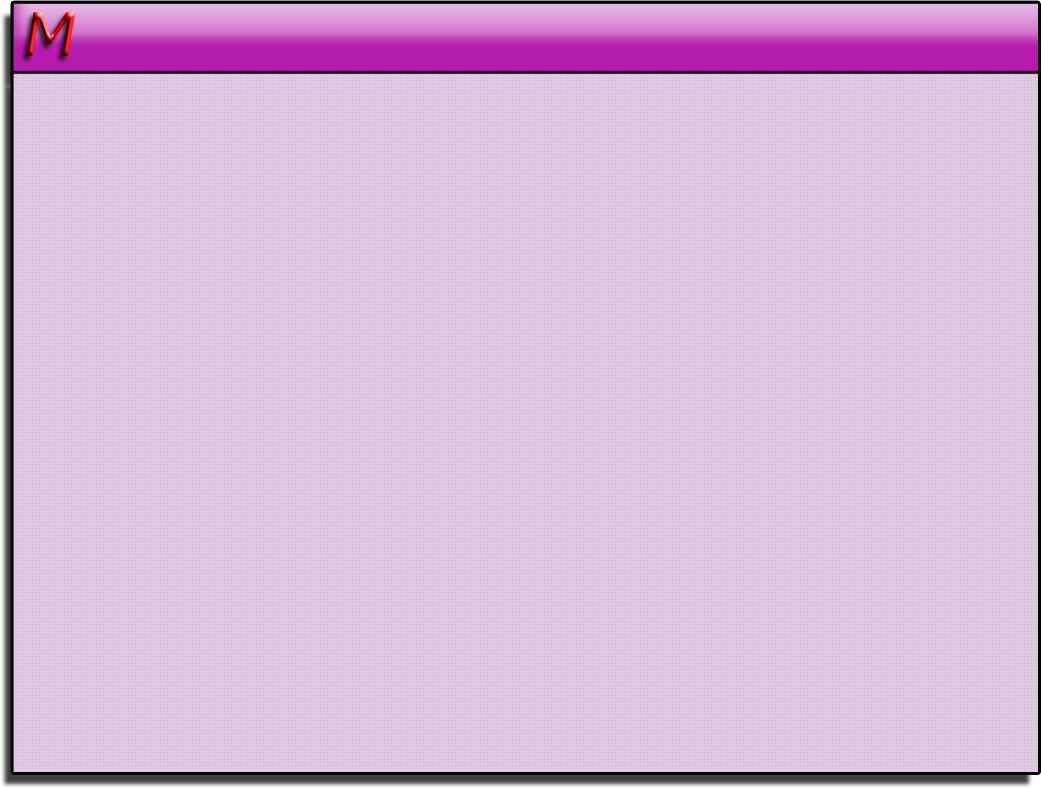
<style>
.page{position:relative;width:1041px;height:788px}
.page>*{position:absolute;margin:0}
.t1{font:61.8px "Verdana";scale:1.04 1}
</style>
<div class="page">
<p class="t1" style="left:26px;top:12px;width:49px;height:44px">M</p>
</div>
